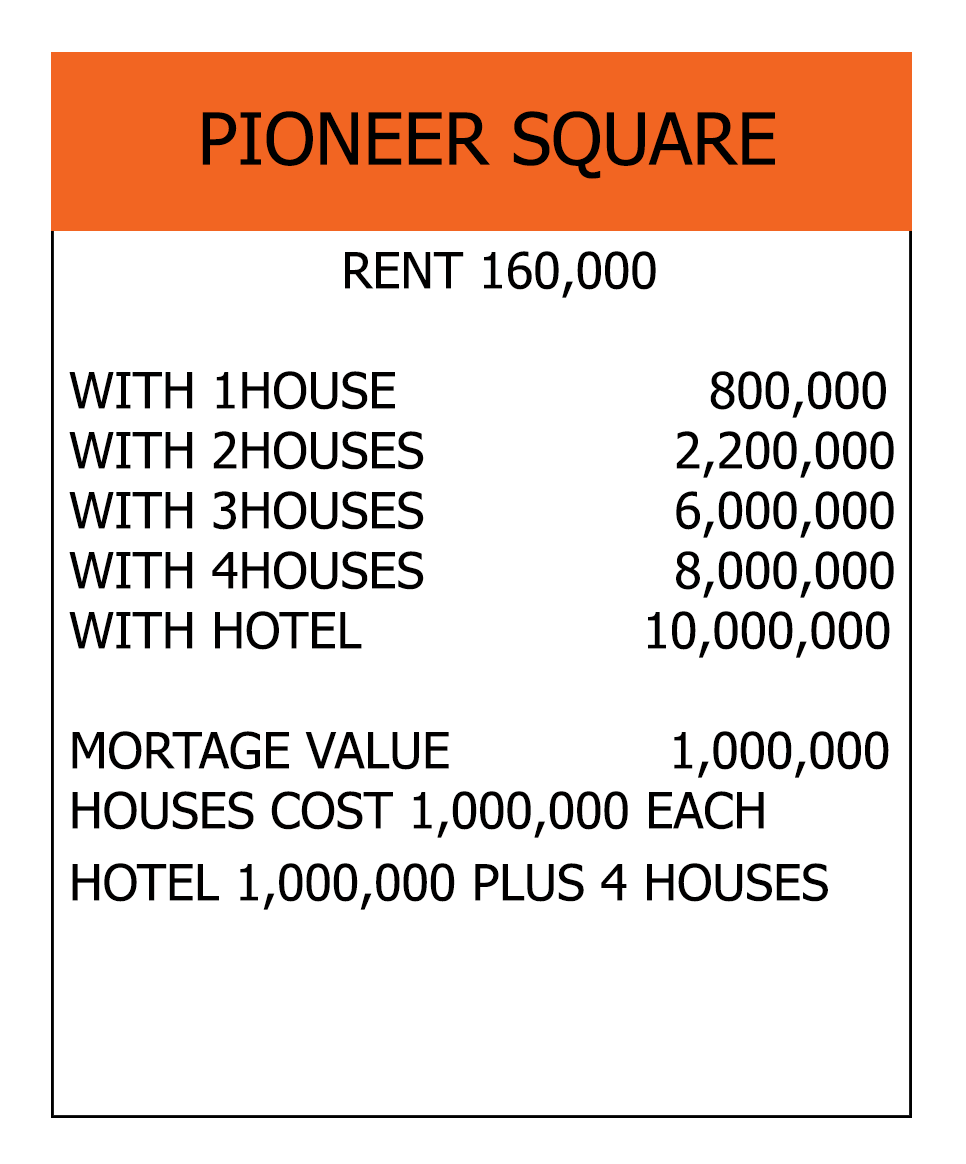
<style>
.page{position:relative;width:966px;height:1164px;background:#ffffff}
.page>*{position:absolute;margin:0}
.t1{font:72px "Tahoma";color:#000000}
.t2{font:50px "Tahoma";color:#010000}
</style>
<div class="page">
<p class="t1" style="left:202px;top:111px;width:573px;height:68px">PIONEER SQUARE</p>
<p class="t2" style="left:69px;top:251px;width:825px;height:659px;text-align:center">RENT 160,000<br><br>WITH 1HOUSE                    800,000<br>WITH 2HOUSES                2,200,000<br>WITH 3HOUSES                6,000,000<br>WITH 4HOUSES                8,000,000<br>WITH HOTEL                  10,000,000<br><br>MORTAGE VALUE              1,000,000<br>HOUSES COST 1,000,000 EACH<br>HOTEL 1,000,000 PLUS 4 HOUSES</p>
</div>
